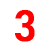
<style>
.page{position:relative;width:50px;height:50px;background:#ffffff}
.page>*{position:absolute;margin:0}
.t1{font:75px "Bahnschrift";letter-spacing:0.01em;color:#ff0000;font-weight:bold}
</style>
<div class="page">
<p class="t1" style="left:15px;top:10px;width:20px;height:32px">3</p>
</div>
